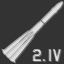
<style>
.page{position:relative;width:64px;height:64px;background:#333333}
.page>*{position:absolute;margin:0}
.t1{font:20px "AmarilloUSAF"}
</style>
<div class="page">
<p class="t1" style="left:32px;top:49px;width:29px;height:12px">2.1v</p>
</div>
